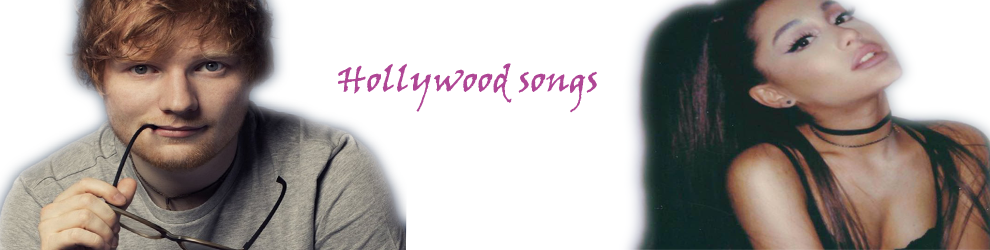
<style>
.page{position:relative;width:990px;height:250px;background:#ffffff}
.page>*{position:absolute;margin:0}
.t1{font:36px "VinerHandITC";color:#af4695}
</style>
<div class="page">
<p class="t1" style="left:338px;top:63px;width:259px;height:50px">Hollywood songs</p>
</div>
